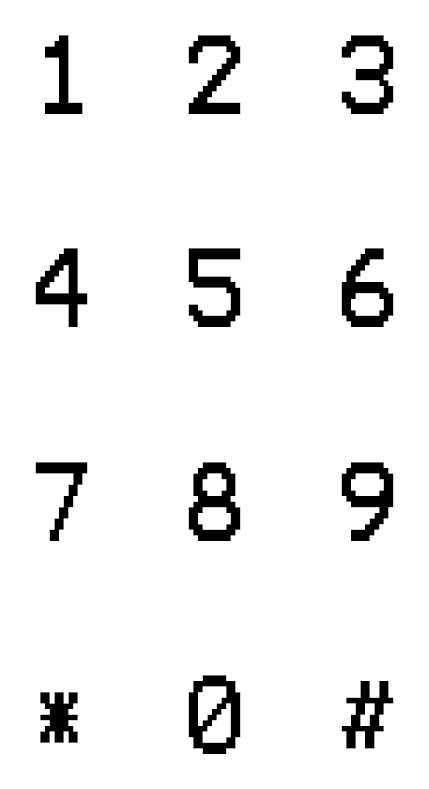
<style>
.page{position:relative;width:429px;height:789px;background:#ffffff}
.page>*{position:absolute;margin:0}
.t1{font:90px/213.3px "Terminal";letter-spacing:0.27em;color:#000000;scale:0.83 1}
</style>
<div class="page">
<p class="t1" style="left:35px;top:35px;width:359px;height:719px">1 2 3 <br>4 5 6<br>7 8 9<br>* 0 #</p>
</div>
